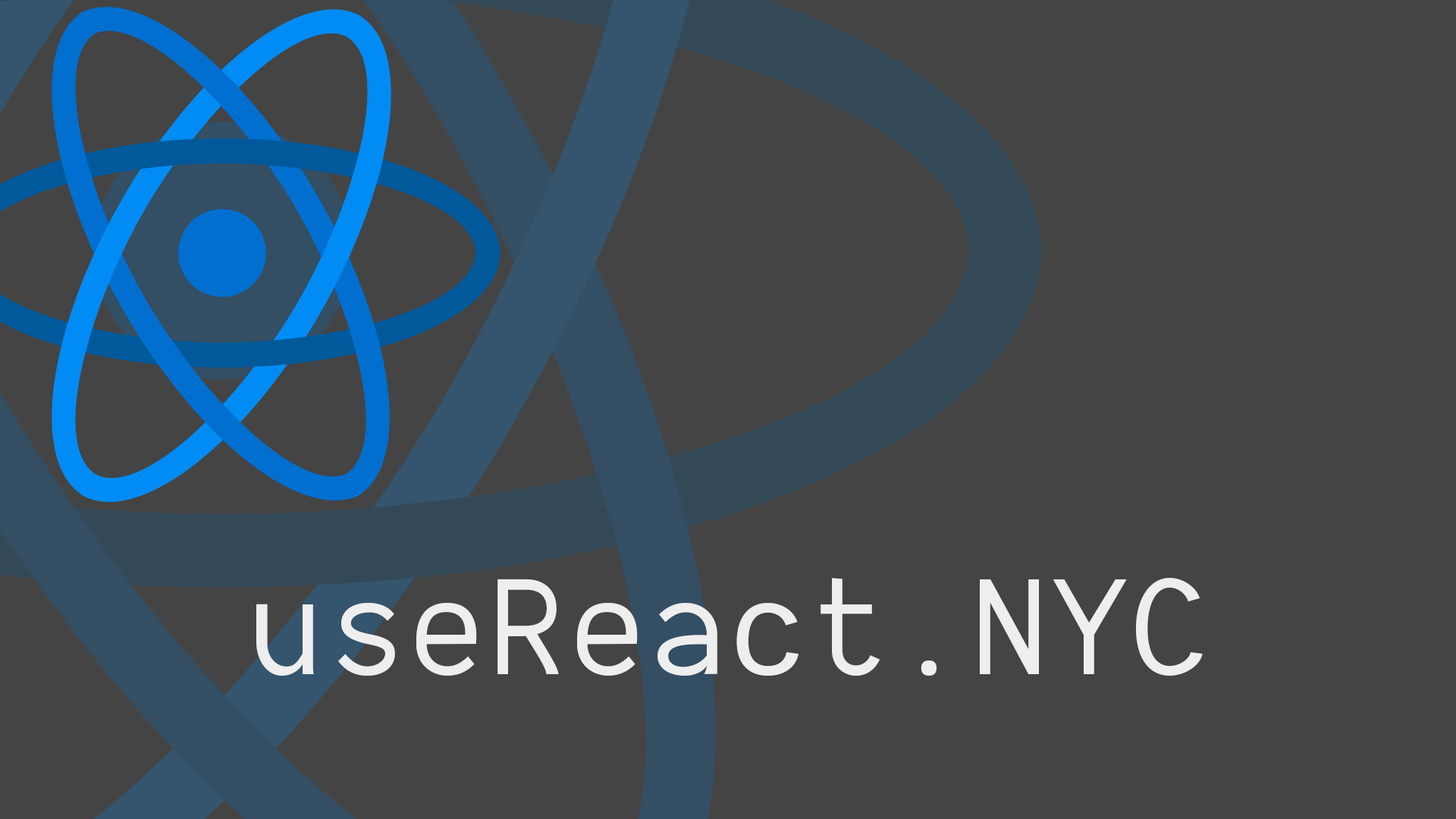
<style>
.page{position:relative;width:1456px;height:819px;background:#444444}
.page>*{position:absolute;margin:0}
.t1{font:146.1px "DankMono-Regular";color:#eeeeee}
</style>
<div class="page">
<p class="t1" style="left:256px;top:578px;width:947px;height:98px">useReact.NYC</p>
</div>
